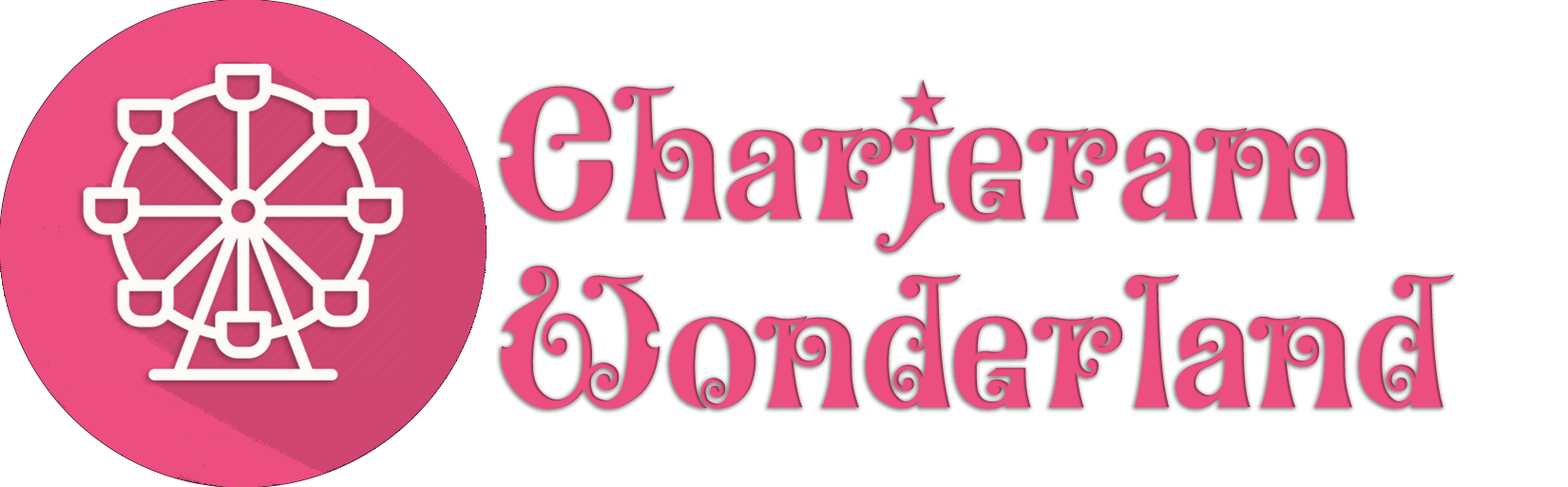
<style>
.page{position:relative;width:1568px;height:487px;background:#ffffff}
.page>*{position:absolute;margin:0}
.t1{font:156.8px "KingthingsWillowless";color:#ec4e7f}
</style>
<div class="page">
<p class="t1" style="left:500px;top:80px;width:954px;height:329px;text-align:justify">Charjeram <br>Wonderland</p>
</div>
